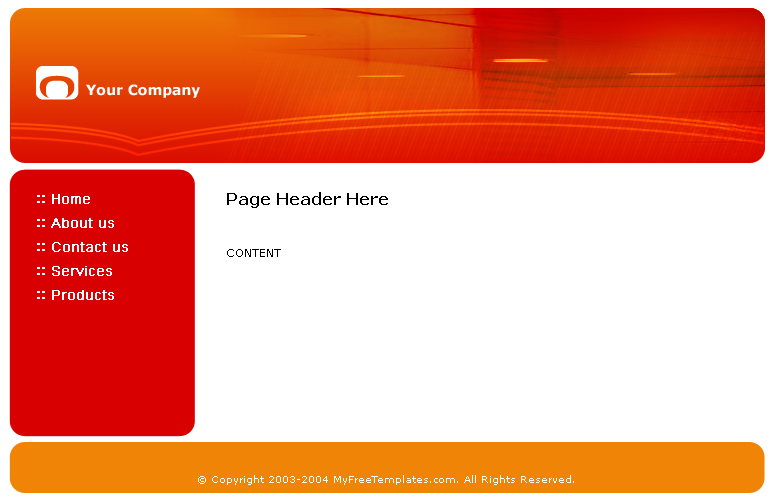
<style>
.page{position:relative;width:775px;height:500px;background:#ffffff}
.page>*{position:absolute;margin:0}
.t1{font:14px "Verdana-Bold";color:#ffffff}
.t2{font:14px/24px "ArialMT";color:#ffffff;font-weight:bold}
.t3{font:14px/24px "Arial-BoldMT";color:#ffffff;font-weight:bold}
.t4{font:16px "Verdana-Bold";color:#000000}
.t5{font:11px "Verdana";color:#000000}
.t6{font:10px "Verdana";color:#ffffff}
</style>
<div class="page">
<p class="t1" style="left:86px;top:84px;width:114px;height:14px">Your Company</p>
<p class="t2" style="left:37px;top:194px;width:91px;height:106px"><span class="t3">:: </span>Home<br><span class="t3">:: </span>About us<br><span class="t3">:: </span>Contact us<br><span class="t3">:: </span>Services<br><span class="t3">:: </span>Products</p>
<p class="t4" style="left:227px;top:192px;width:161px;height:16px">Page Header Here</p>
<p class="t5" style="left:227px;top:249px;width:54px;height:8px">CONTENT</p>
<p class="t6" style="left:198px;top:475px;width:376px;height:10px">© Copyright 2003-2004 MyFreeTemplates.com. All Rights Reserved.</p>
</div>
